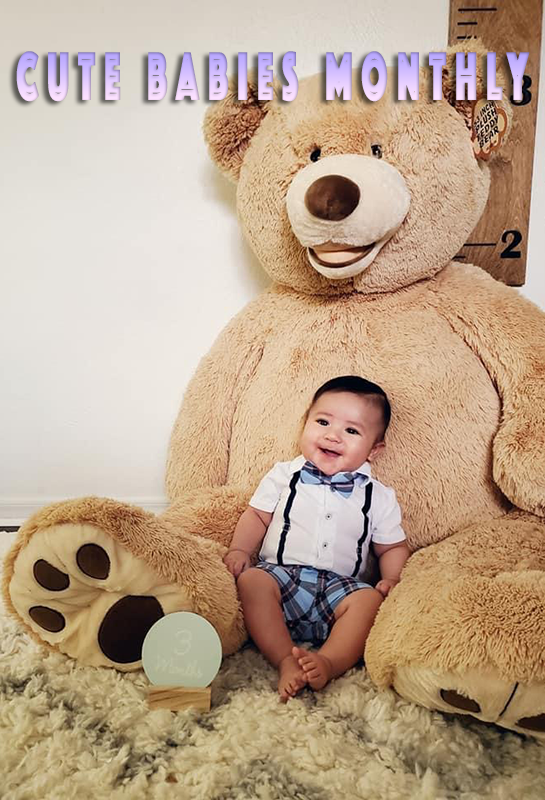
<style>
.page{position:relative;width:545px;height:800px}
.page>*{position:absolute;margin:0}
.t1{font:70px "Phosphate-Inline";letter-spacing:0.25em;text-transform:uppercase;font-weight:bold;scale:0.5 1}
</style>
<div class="page">
<p class="t1" style="left:16px;top:51px;width:514px;height:51px">cute babies monthly</p>
</div>
